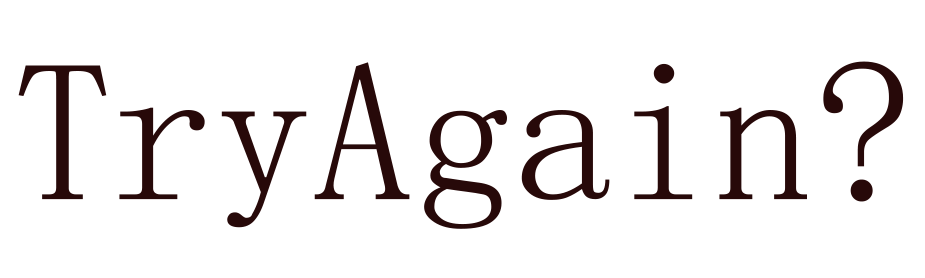
<style>
.page{position:relative;width:925px;height:278px;background:#ffffff}
.page>*{position:absolute;margin:0}
.t1{font:200px "SimSun-ExtB";color:#270909}
</style>
<div class="page">
<p class="t1" style="left:18px;top:61px;width:886px;height:168px">TryAgain?</p>
</div>
